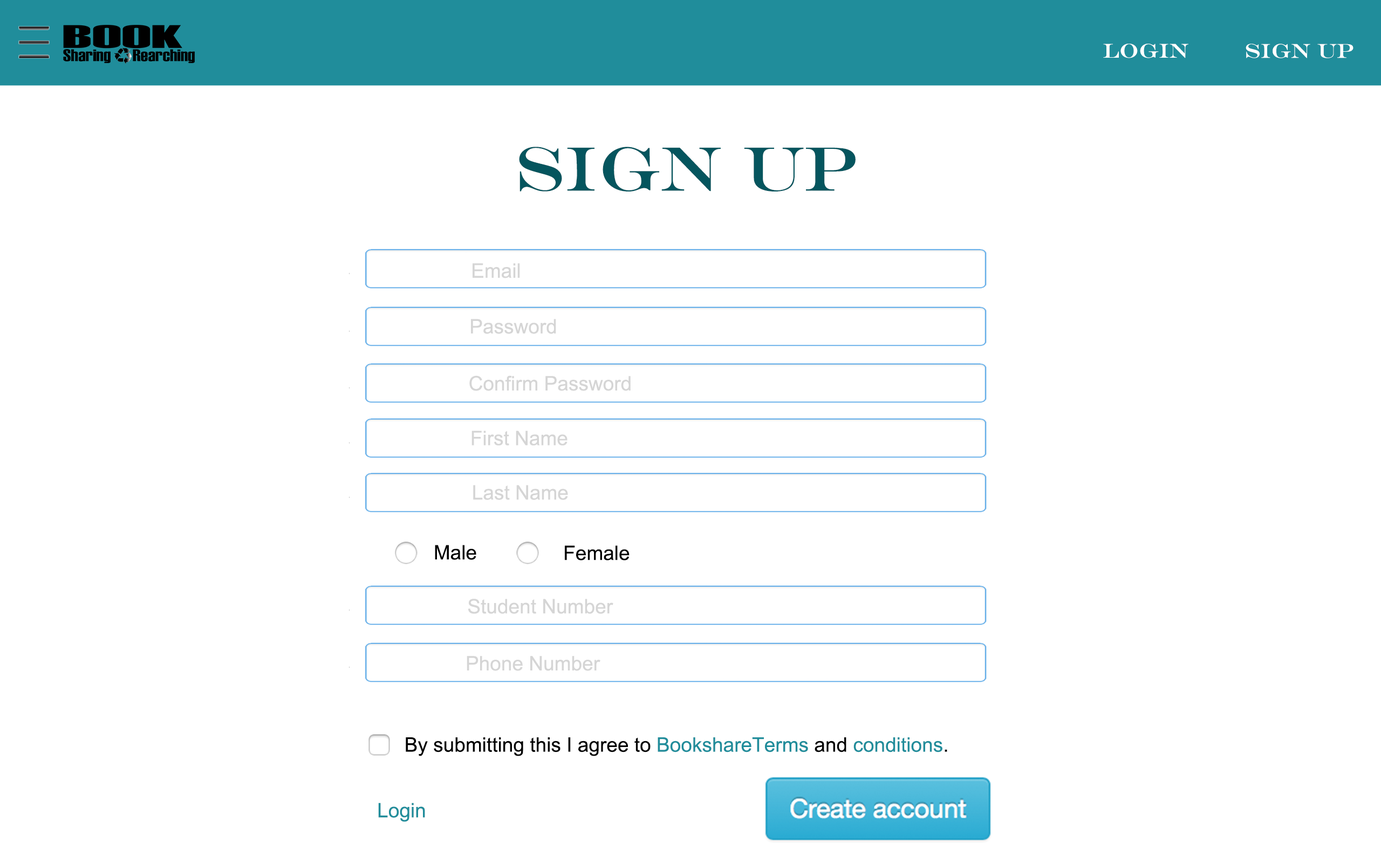
<style>
.page{position:relative;width:1381px;height:863px;background:#ffffff}
.page>*{position:absolute;margin:0}
.t1{font:20px "EngraversMT";color:#ffffff}
.t2{font:62.8px "EngraversMT";color:#05555e}
.t3{font:20px "ArialMT";color:#d5d5d5}
.t4{font:20px "ArialMT";color:#000000}
.t5{font:20px "ArialMT";color:#208d9b}
</style>
<div class="page">
<p class="t1" style="left:1103px;top:44px;width:86px;height:14px">Login</p>
<p class="t1" style="left:1246px;top:44px;width:108px;height:14px">sign up</p>
<p class="t2" style="left:519px;top:147px;width:337px;height:45px">sign up</p>
<p class="t3" style="left:473px;top:263px;width:47px;height:15px">Email</p>
<p class="t3" style="left:471px;top:319px;width:85px;height:15px">Password</p>
<p class="t3" style="left:469px;top:376px;width:162px;height:15px">Confirm Password</p>
<p class="t3" style="left:472px;top:431px;width:96px;height:15px">First Name</p>
<p class="t3" style="left:473px;top:485px;width:95px;height:15px">Last Name</p>
<p class="t4" style="left:435px;top:545px;width:41px;height:15px">Male</p>
<p class="t4" style="left:565px;top:545px;width:65px;height:16px">Female</p>
<p class="t3" style="left:468px;top:599px;width:145px;height:15px">Student Number</p>
<p class="t3" style="left:467px;top:656px;width:134px;height:15px">Phone Number</p>
<p class="t4" style="left:406px;top:738px;width:541px;height:18px">By submitting this I agree to <span class="t5">BookshareTerms</span> and <span class="t5">conditions</span>.</p>
<p class="t5" style="left:378px;top:803px;width:47px;height:19px">Login</p>
</div>
